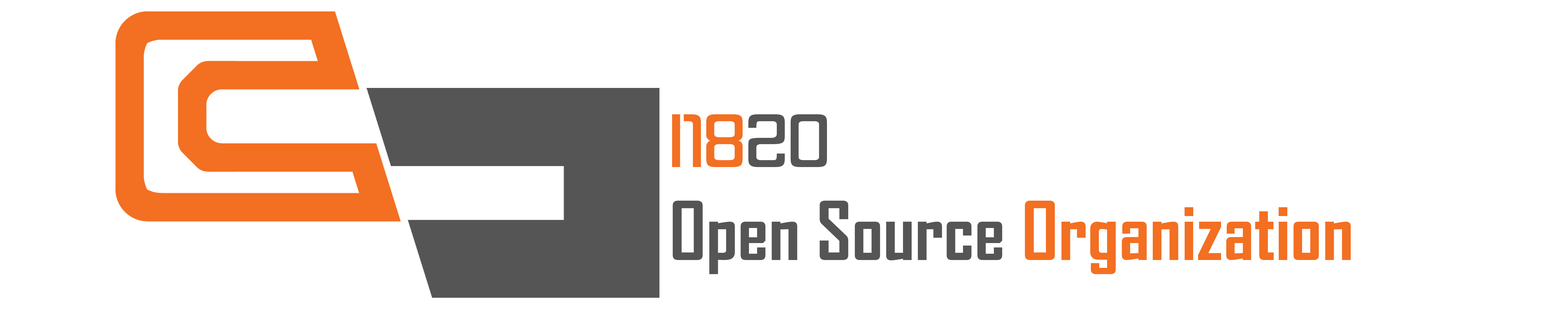
<style>
.page{position:relative;width:1568px;height:314px;background:#ffffff}
.page>*{position:absolute;margin:0}
.t1{font:77.4px "AgencyFB-Bold";color:#f36f21}
.t2{font:77.4px "Butterbelly-Regular";color:#f36f21}
.t3{font:77.4px "Butterbelly-Regular";color:#555555}
.t4{font:77.4px "AgencyFB-Bold";color:#555555}
</style>
<div class="page">
<p class="t1" style="left:672px;top:114px;width:679px;height:160px;text-align:right"><span class="t2">I18</span><span class="t3">20<br></span><span class="t4">Open Source </span>Organization</p>
</div>
